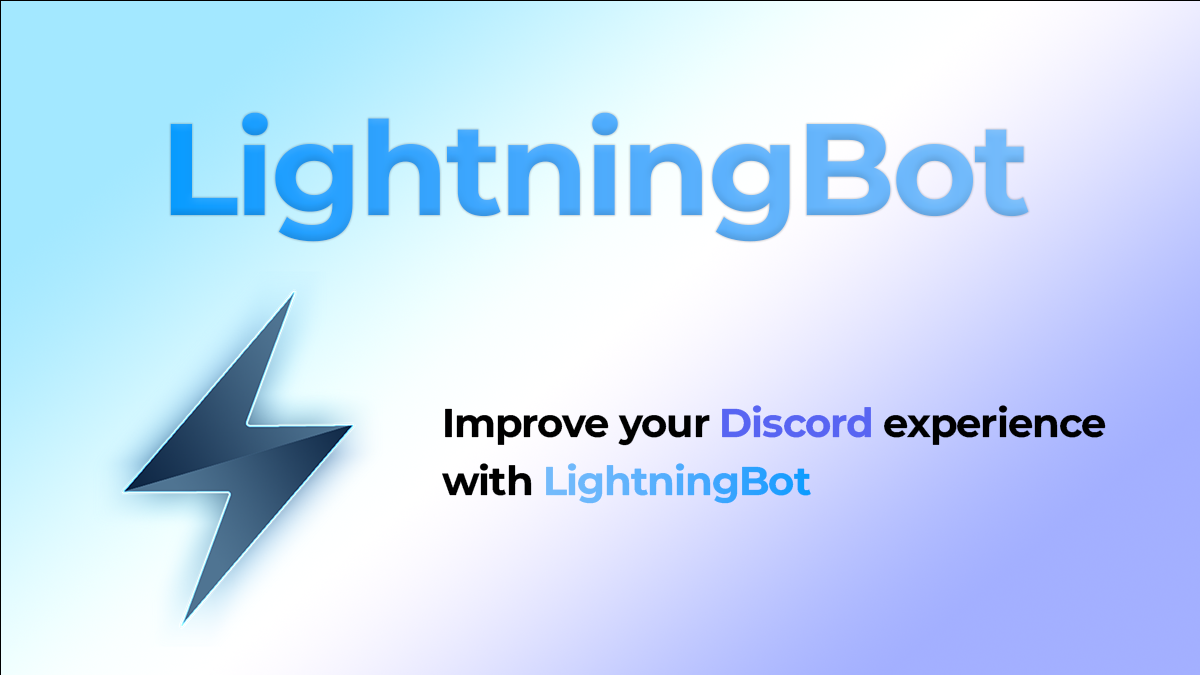
<style>
.page{position:relative;width:1200px;height:675px}
.page>*{position:absolute;margin:0}
.t1{font:130px "MontserratRoman-Bold";letter-spacing:-0.025em}
.t2{font:40px "MontserratRoman-Bold";letter-spacing:-0.025em;color:#000000}
.t3{font:40px "MontserratRoman-Bold";letter-spacing:-0.025em;color:#5865f2}
.t4{font:40px "MontserratRoman-Bold";letter-spacing:-0.025em}
</style>
<div class="page">
<p class="t1" style="left:170px;top:112px;width:859px;height:130px">LightningBot</p>
<p class="t2" style="left:442px;top:405px;width:664px;height:91px">Improve your <span class="t3">Discord</span> experience<br>with</p>
<p class="t4" style="left:546px;top:463px;width:265px;height:41px">LightningBot</p>
</div>
